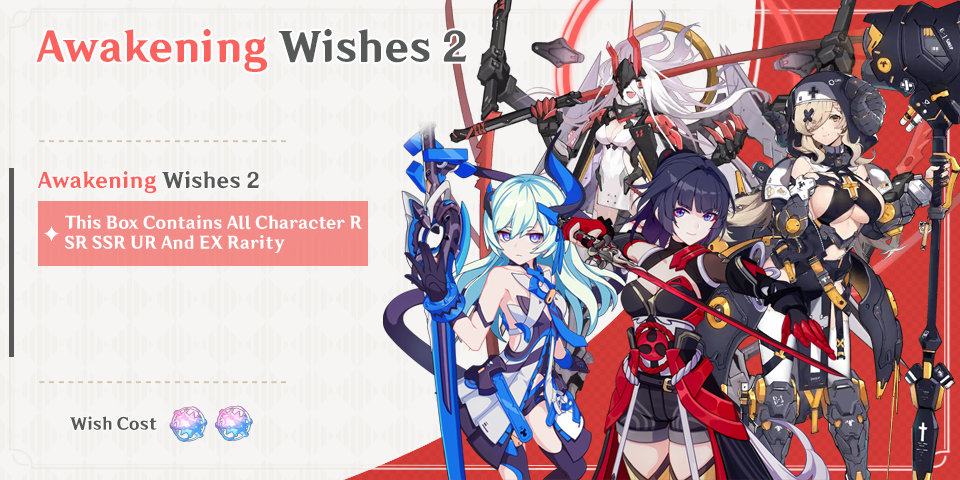
<style>
.page{position:relative;width:960px;height:480px}
.page>*{position:absolute;margin:0}
.t1{font:39.9px "Default_SC-85W";letter-spacing:-0.005em;color:#fd635e}
.t2{font:39.9px "Default_SC-85W";letter-spacing:-0.005em;color:#575858}
.t3{font:20.5px "Default_SC-85W";letter-spacing:-0.005em;color:#fd635e}
.t4{font:20.5px "Default_SC-85W";letter-spacing:-0.005em;color:#575858}
.t5{font:16.5px/19.9px "Default_SC-85W";letter-spacing:-0.005em;color:#ffffff}
.t6{font:16.2px "Default_SC-85W";letter-spacing:-0.005em;color:#575858}
</style>
<div class="page">
<p class="t1" style="left:36px;top:29px;width:431px;height:43px">Awakening <span class="t2">Wishes 2</span></p>
<p class="t3" style="left:38px;top:171px;width:221px;height:23px">Awakening<span class="t4"> Wishes 2</span></p>
<p class="t5" style="left:64px;top:215px;width:299px;height:38px">This Box Contains All Character R <br>SR SSR UR And EX Rarity</p>
<p class="t6" style="left:69px;top:416px;width:88px;height:14px">Wish Cost</p>
</div>
